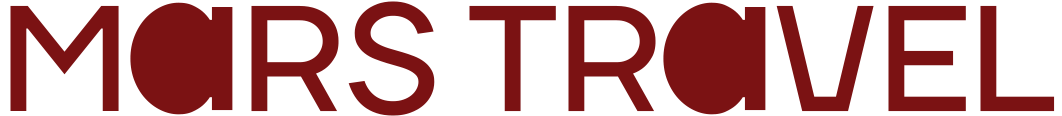
<style>
.page{position:relative;width:1062px;height:116px;background:#ffffff}
.page>*{position:absolute;margin:0}
.t1{font:150px "TTFirs-Bold";letter-spacing:0.005em;color:#7b1213}
.t2{font:214.5px "TTFirs-Bold";letter-spacing:0.005em;color:#7b1213}
</style>
<div class="page">
<p class="t1" style="left:10px;top:1px;width:1045px;height:115px">M    RS TR    VEL</p>
<p class="t2" style="left:130px;top:2px;width:103px;height:113px">a</p>
<p class="t2" style="left:663px;top:2px;width:103px;height:113px">a</p>
</div>
